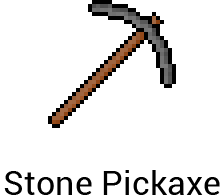
<style>
.page{position:relative;width:224px;height:195px;background:#ffffff}
.page>*{position:absolute;margin:0}
.t1{font:34.3px "Roboto-Regular";color:#000000}
</style>
<div class="page">
<p class="t1" style="left:4px;top:170px;width:216px;height:25px">Stone Pickaxe</p>
</div>
